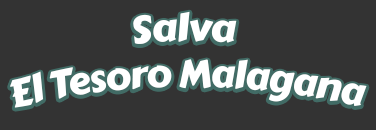
<style>
.page{position:relative;width:376px;height:130px;background:#333333}
.page>*{position:absolute;margin:0}
.t1{font:38px "CarterOne";letter-spacing:-0.02em;color:#ffffff}
</style>
<div class="page">
<p class="t1" style="left:10px;top:11px;width:357px;height:97px;text-align:center">Salva <br>El Tesoro Malagana</p>
</div>
